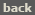
<style>
.page{position:relative;width:35px;height:15px;background:#5a5a5a}
.page>*{position:absolute;margin:0}
.t1{font:11px "Verdana-Bold";color:#dedbcb}
</style>
<div class="page">
<p class="t1" style="left:3px;top:3px;width:29px;height:9px">back</p>
</div>
